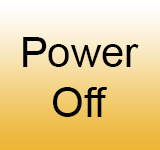
<style>
.page{position:relative;width:160px;height:150px}
.page>*{position:absolute;margin:0}
.t1{font:41.7px "ArialMT";color:#010101}
</style>
<div class="page">
<p class="t1" style="left:23px;top:37px;width:116px;height:80px;text-align:center">Power<br>Off</p>
</div>
